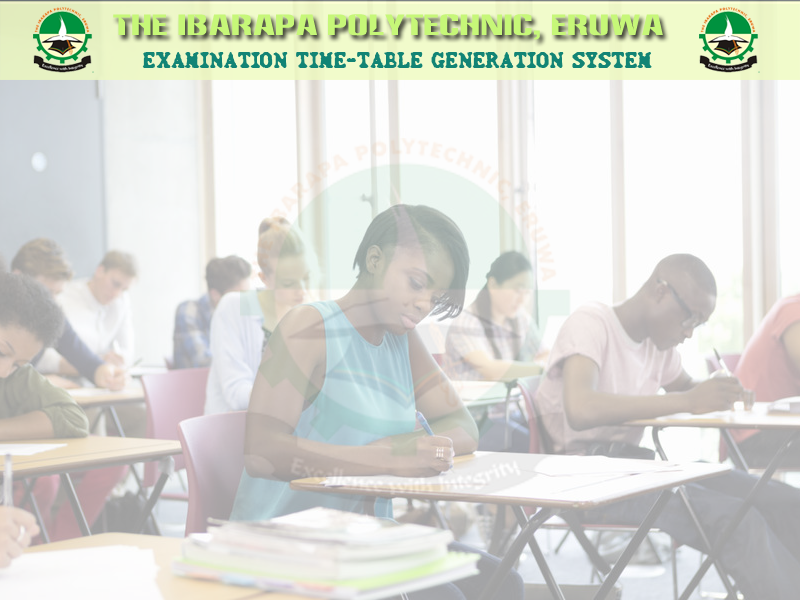
<style>
.page{position:relative;width:800px;height:600px}
.page>*{position:absolute;margin:0}
.t1{font:28px "Anklepants";color:#c6f778}
.t2{font:24px "3000";color:#128475}
</style>
<div class="page">
<p class="t1" style="left:113px;top:14px;width:550px;height:26px">THE IBARAPA POLYTECHNIC, ERUWA</p>
<p class="t2" style="left:142px;top:52px;width:510px;height:16px">EXAMINATION TIME-TABLE GENERATION SYSTEM</p>
</div>
